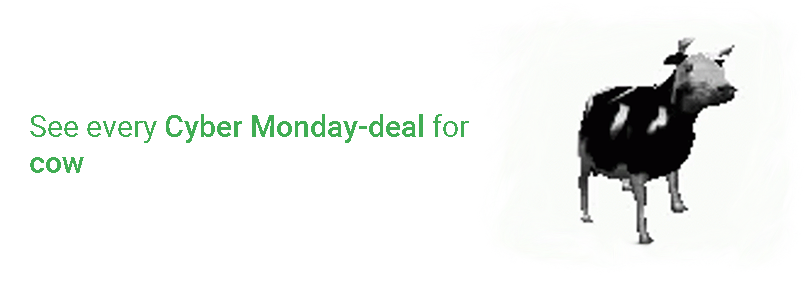
<style>
.page{position:relative;width:808px;height:286px;background:#ffffff}
.page>*{position:absolute;margin:0}
.t1{font:30px "Roboto-Medium";color:#40ad53}
.t2{font:30px "Roboto-Regular";color:#40ad53}
</style>
<div class="page">
<p class="t1" style="left:30px;top:114px;width:439px;height:59px"><span class="t2">See every </span>Cyber Monday-deal<span class="t2"> for <br></span>cow</p>
</div>
